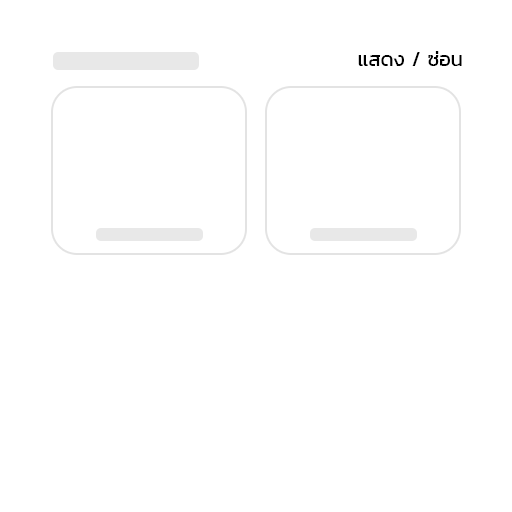
<style>
.page{position:relative;width:512px;height:512px;background:#ffffff}
.page>*{position:absolute;margin:0}
.t1{font:20.6px "Kanit-Regular";letter-spacing:-0.02em;color:#000000;text-transform:uppercase}
</style>
<div class="page">
<p class="t1" style="left:358px;top:51px;width:104px;height:15px">แสดง / ซ่อน</p>
</div>
